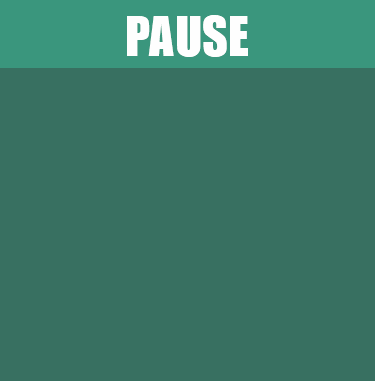
<style>
.page{position:relative;width:375px;height:381px;background:#387061}
.page>*{position:absolute;margin:0}
.t1{font:50px "Impact";color:#fefefe}
</style>
<div class="page">
<p class="t1" style="left:127px;top:15px;width:121px;height:42px">PAUSE</p>
</div>
